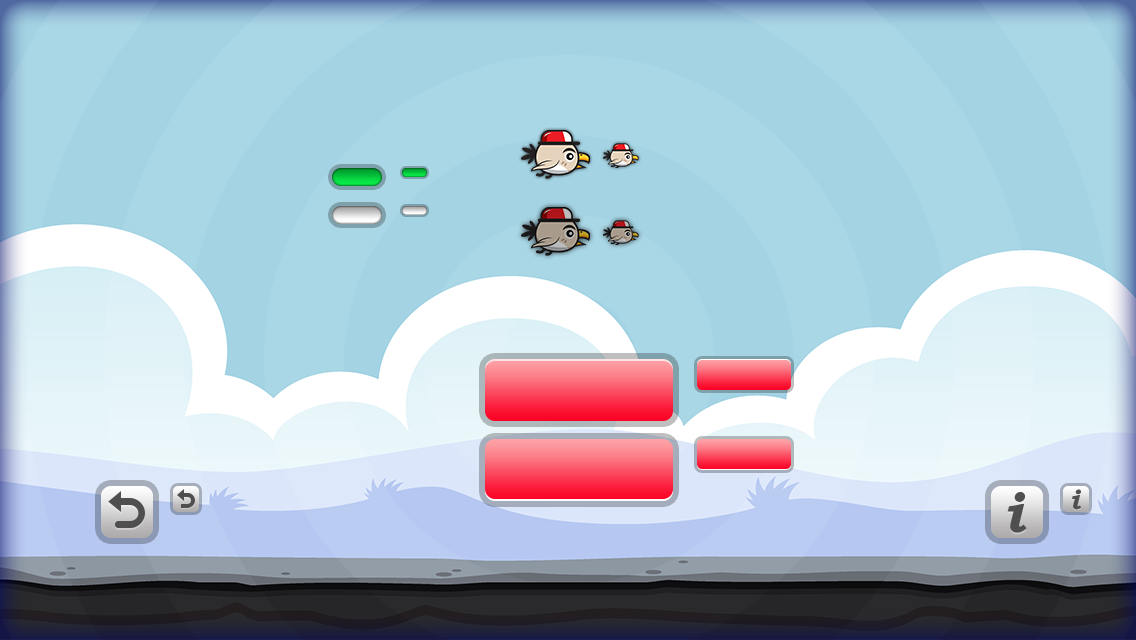
<style>
.page{position:relative;width:1136px;height:640px}
.page>*{position:absolute;margin:0}
.t1{font:56px "BookmanOldStyle-BoldItalic";color:#4f4f4f}
.t2{font:28px "BookmanOldStyle-BoldItalic";color:#4f4f4f}
</style>
<div class="page">
<p class="t1" style="left:1007px;top:492px;width:20px;height:41px">i</p>
<p class="t2" style="left:1072px;top:489px;width:10px;height:21px">i</p>
</div>
